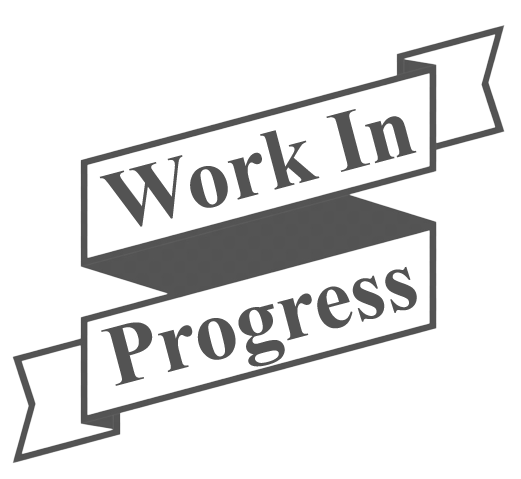
<style>
.page{position:relative;width:521px;height:479px;background:#ffffff}
.page>*{position:absolute;margin:0}
.t1{font:86.7px "TimesNewRomanPS-BoldMT";color:#535353}
</style>
<div class="page">
<p class="t1" style="left:99px;top:109px;width:318px;height:118px;rotate:-15deg">Work In</p>
<p class="t1" style="left:101px;top:266px;width:316px;height:120px;rotate:-15deg">Progress</p>
</div>
